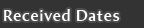
<style>
.page{position:relative;width:144px;height:28px;background:#333333}
.page>*{position:absolute;margin:0}
.t1{font:16px "AmiraParadiso";letter-spacing:0.05em;color:#ffffff}
</style>
<div class="page">
<p class="t1" style="left:4px;top:9px;width:116px;height:12px">Received Dates</p>
</div>
